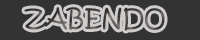
<style>
.page{position:relative;width:200px;height:40px;background:#333333}
.page>*{position:absolute;margin:0}
.t1{font:24px "KristenITC-Regular"}
</style>
<div class="page">
<p class="t1" style="left:24px;top:7px;width:141px;height:24px">ZABENDO</p>
</div>
